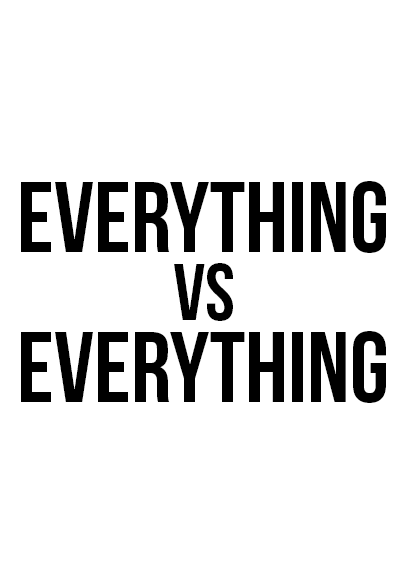
<style>
.page{position:relative;width:408px;height:585px;background:#ffffff}
.page>*{position:absolute;margin:0}
.t1{font:100px "BebasNeue";color:#000000}
.t2{font:80px "BebasNeue";color:#000000}
</style>
<div class="page">
<p class="t1" style="left:21px;top:181px;width:365px;height:72px">everything</p>
<p class="t2" style="left:174px;top:263px;width:59px;height:58px">vs</p>
<p class="t1" style="left:21px;top:331px;width:365px;height:72px">everything</p>
</div>
